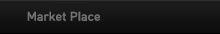
<style>
.page{position:relative;width:220px;height:34px}
.page>*{position:absolute;margin:0}
.t1{font:12px "HCRDotum-Bold";color:#717171}
</style>
<div class="page">
<p class="t1" style="left:27px;top:11px;width:73px;height:10px">Market Place</p>
</div>
